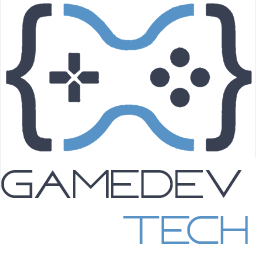
<style>
.page{position:relative;width:256px;height:256px;background:#ffffff}
.page>*{position:absolute;margin:0}
.t1{font:48px "FAFERSTechnicalFont";color:#394052}
.t2{font:48px "FAFERSTechnicalFont";color:#5793c7}
</style>
<div class="page">
<p class="t1" style="left:1px;top:170px;width:241px;height:28px">GAMEDEV</p>
<p class="t2" style="left:123px;top:216px;width:125px;height:28px">TECH</p>
</div>
